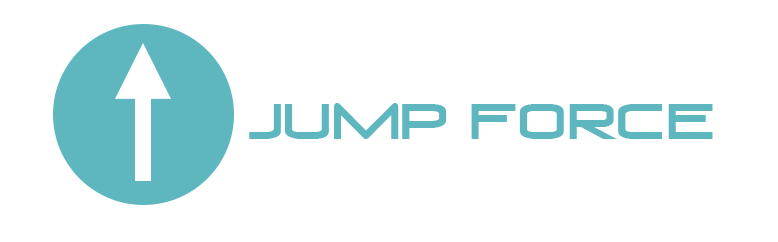
<style>
.page{position:relative;width:778px;height:242px;background:#ffffff}
.page>*{position:absolute;margin:0}
.t1{font:48px "VenusRising";color:#5eb7bf}
</style>
<div class="page">
<p class="t1" style="left:249px;top:103px;width:464px;height:36px">JUMP Force</p>
</div>
